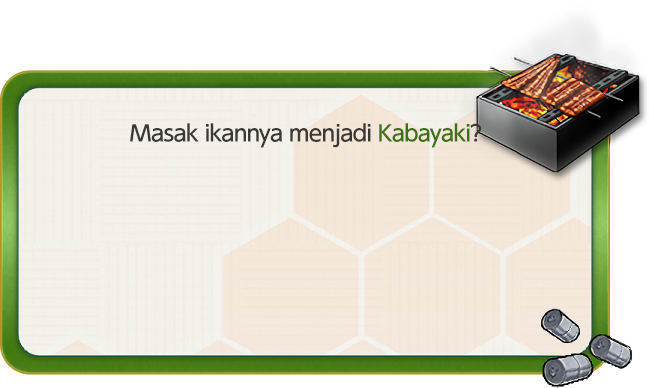
<style>
.page{position:relative;width:649px;height:388px;background:#ffffff}
.page>*{position:absolute;margin:0}
.t1{font:22px "UDShinGoPro-Medium";letter-spacing:-0.04em;color:#3b3935}
.t2{font:22px "UDShinGoPro-Medium";letter-spacing:-0.04em;color:#3e7115}
</style>
<div class="page">
<p class="t1" style="left:130px;top:123px;width:352px;height:25px">Masak ikannya menjadi <span class="t2">Kabayaki</span>?</p>
</div>
